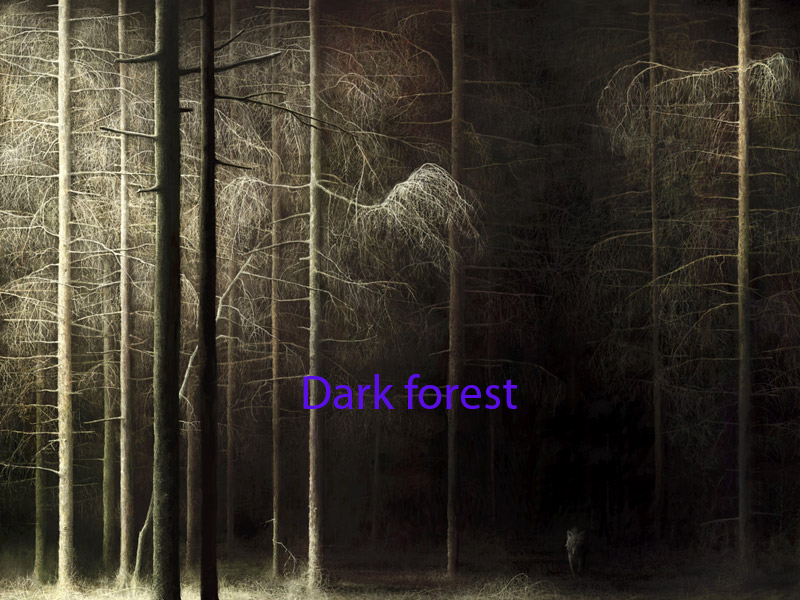
<style>
.page{position:relative;width:800px;height:600px}
.page>*{position:absolute;margin:0}
.t1{font:48px "MyriadPro-Regular";color:#590ee5}
</style>
<div class="page">
<p class="t1" style="left:303px;top:374px;width:214px;height:35px">Dark forest</p>
</div>
